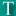
<style>
.page{position:relative;width:16px;height:16px;background:#009688}
.page>*{position:absolute;margin:0}
.t1{font:19.7px "TimesNewRomanPSMT";color:#ffffff}
</style>
<div class="page">
<p class="t1" style="left:2px;top:1px;width:12px;height:14px">T</p>
</div>
